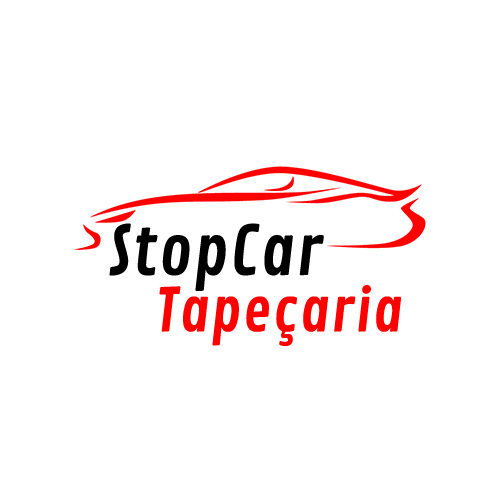
<style>
.page{position:relative;width:500px;height:500px;background:#ffffff}
.page>*{position:absolute;margin:0}
.t1{font:67px "ContrailOne-Regular";letter-spacing:0.025em;color:#000000}
.t2{font:58.7px "ContrailOne-Regular";letter-spacing:0.025em;color:#ff0000}
</style>
<div class="page">
<p class="t1" style="left:109px;top:223px;width:215px;height:68px">StopCar</p>
<p class="t2" style="left:159px;top:285px;width:243px;height:61px">Tapeçaria</p>
</div>
